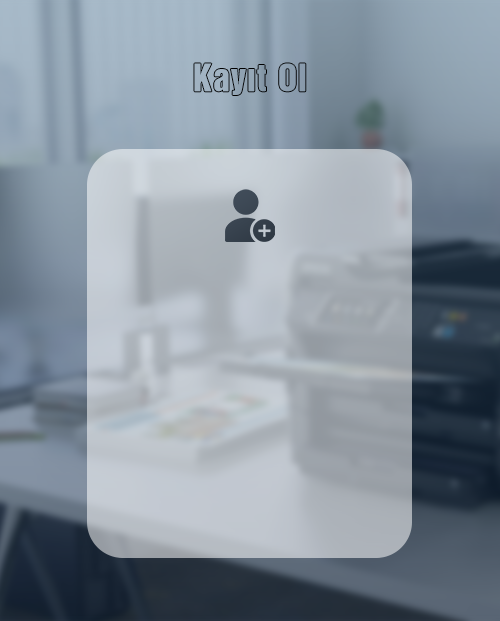
<style>
.page{position:relative;width:500px;height:621px}
.page>*{position:absolute;margin:0}
.t1{font:34.1px "00623";letter-spacing:0.04em;color:#92a4b4}
</style>
<div class="page">
<p class="t1" style="left:194px;top:63px;width:112px;height:32px">Kayıt Ol</p>
</div>
